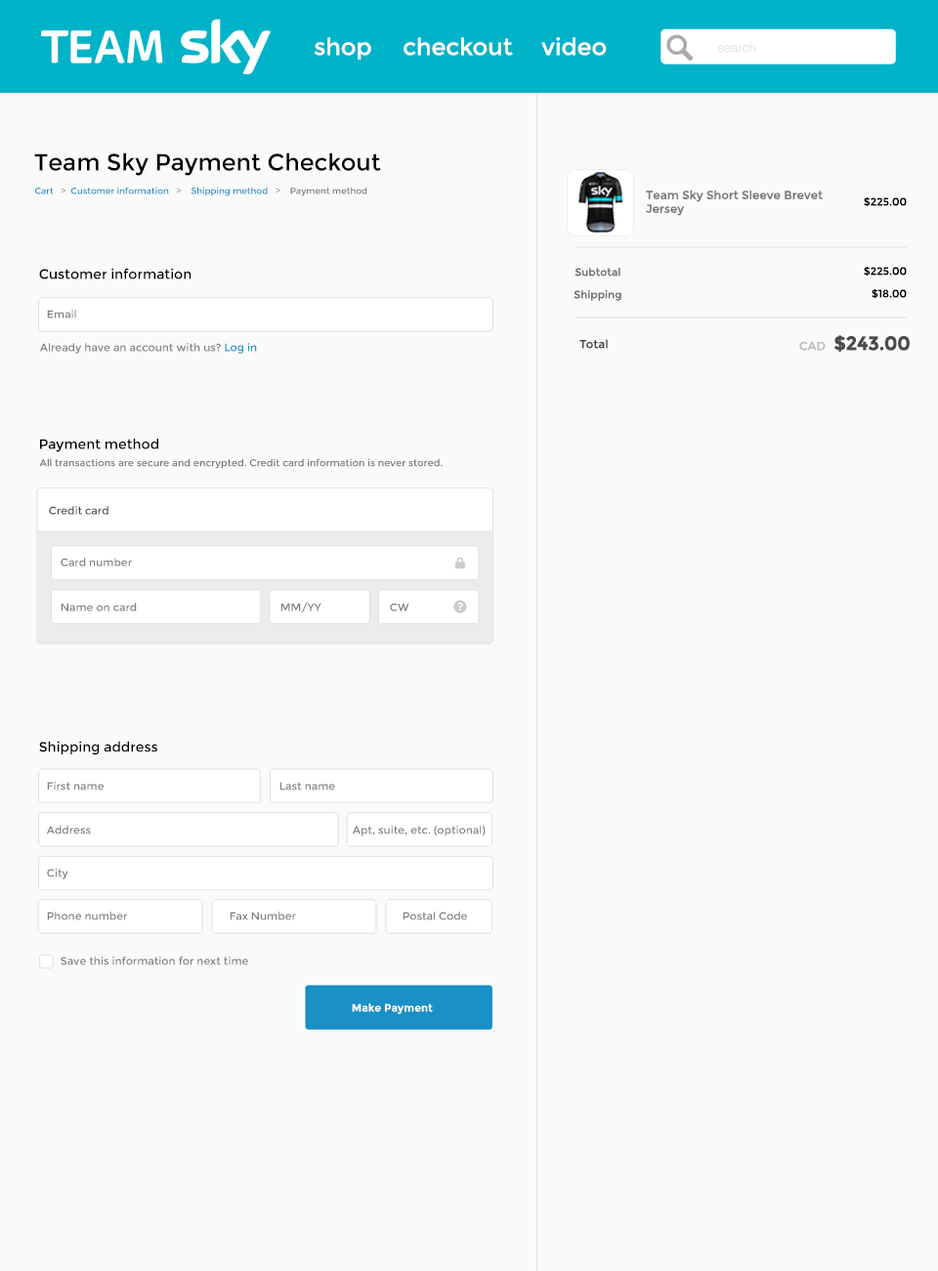
<style>
.page{position:relative;width:938px;height:1271px;background:#fafafa}
.page>*{position:absolute;margin:0}
.t1{font:23.5px "Montserrat-Regular";color:#fffefe}
.t2{font:13.2px "HelveticaNeue";color:#e8e8e8}
.t3{font:23.5px "Montserrat-Regular";color:#000000}
.t4{font:8.8px "Montserrat-Regular";color:#178fc5}
.t5{font:8.8px "Montserrat-Regular";color:#a6a6a6}
.t6{font:8.8px "Montserrat-Regular";color:#767676}
.t7{font:11.7px/13.7px "Montserrat-Regular";color:#7c7c7c}
.t8{font:10.7px "Montserrat-Regular";color:#000000}
.t9{font:10.7px "Montserrat-Regular";color:#fc0101}
.t10{font:13.7px "Montserrat-Regular";color:#000000}
.t11{font:10.7px "Montserrat-Regular";color:#717171}
.t12{font:10.7px "Montserrat-Regular";color:#818080}
.t13{font:11.7px "Montserrat-Regular";color:#4b4b4b}
.t14{font:19.5px "Montserrat-Bold";letter-spacing:-0.025em;color:#4b4b4b}
.t15{font:11.7px "Montserrat-Regular";color:#bfbcbc}
.t16{font:10.7px "Montserrat-Regular";color:#1990c6}
.t17{font:9.8px "Montserrat-Regular";color:#787878}
.t18{font:10.7px "Montserrat-Regular";color:#4d4d4d}
.t19{font:10.7px "Montserrat-Bold";color:#ffffff}
</style>
<div class="page">
<p class="t1" style="left:314px;top:37px;width:57px;height:23px">shop</p>
<p class="t1" style="left:404px;top:37px;width:109px;height:19px">checkout</p>
<p class="t1" style="left:541px;top:37px;width:66px;height:19px">video</p>
<p class="t2" style="left:717px;top:42px;width:39px;height:11px">search</p>
<p class="t3" style="left:34px;top:152px;width:347px;height:24px">Team Sky Payment Checkout</p>
<p class="t4" style="left:35px;top:187px;width:332px;height:9px">Cart   <span class="t5">&gt;  </span>Customer information   <span class="t5">&gt;    </span>Shipping method   <span class="t5">&gt;    </span><span class="t6">Payment method</span></p>
<p class="t7" style="left:646px;top:190px;width:177px;height:26px">Team Sky Short Sleeve Brevet<br>Jersey</p>
<p class="t8" style="left:864px;top:197px;width:43px;height:10px"><span class="t9"> </span>$225.00</p>
<p class="t10" style="left:39px;top:268px;width:153px;height:11px">Customer information</p>
<p class="t11" style="left:575px;top:268px;width:45px;height:9px">Subtotal</p>
<p class="t8" style="left:864px;top:267px;width:43px;height:10px"><span class="t9"> </span>$225.00</p>
<p class="t11" style="left:574px;top:290px;width:47px;height:11px">Shipping</p>
<p class="t8" style="left:872px;top:289px;width:35px;height:10px"><span class="t9"> </span>$18.00</p>
<p class="t12" style="left:47px;top:310px;width:29px;height:9px">Email</p>
<p class="t13" style="left:579px;top:339px;width:29px;height:10px">Total</p>
<p class="t14" style="left:799px;top:335px;width:111px;height:17px"><span class="t15">CAD  </span>$243.00</p>
<p class="t12" style="left:39px;top:343px;width:218px;height:11px">Already have an account with us?<span class="t16"> Log in</span></p>
<p class="t10" style="left:40px;top:439px;width:118px;height:13px">Payment method</p>
<p class="t17" style="left:39px;top:458px;width:404px;height:11px">All transactions are secure and encrypted. Credit card information is never stored.</p>
<p class="t18" style="left:49px;top:506px;width:59px;height:9px">Credit card</p>
<p class="t12" style="left:61px;top:558px;width:71px;height:9px">Card number</p>
<p class="t12" style="left:61px;top:603px;width:76px;height:9px">Name on card</p>
<p class="t12" style="left:280px;top:602px;width:41px;height:11px">MM/YY</p>
<p class="t12" style="left:390px;top:603px;width:19px;height:9px">CW</p>
<p class="t10" style="left:39px;top:741px;width:118px;height:14px">Shipping address</p>
<p class="t12" style="left:47px;top:782px;width:57px;height:8px">First name</p>
<p class="t12" style="left:279px;top:782px;width:56px;height:8px">Last name</p>
<p class="t12" style="left:46px;top:826px;width:45px;height:8px">Address</p>
<p class="t12" style="left:352px;top:826px;width:134px;height:10px">Apt, suite, etc. (optional)</p>
<p class="t12" style="left:47px;top:869px;width:21px;height:10px">City</p>
<p class="t12" style="left:47px;top:912px;width:80px;height:8px">Phone number</p>
<p class="t12" style="left:230px;top:912px;width:66px;height:8px">Fax Number</p>
<p class="t12" style="left:403px;top:912px;width:64px;height:8px">Postal Code</p>
<p class="t12" style="left:61px;top:957px;width:187px;height:8px">Save this information for next time</p>
<p class="t19" style="left:352px;top:1003px;width:81px;height:11px">Make Payment</p>
</div>
